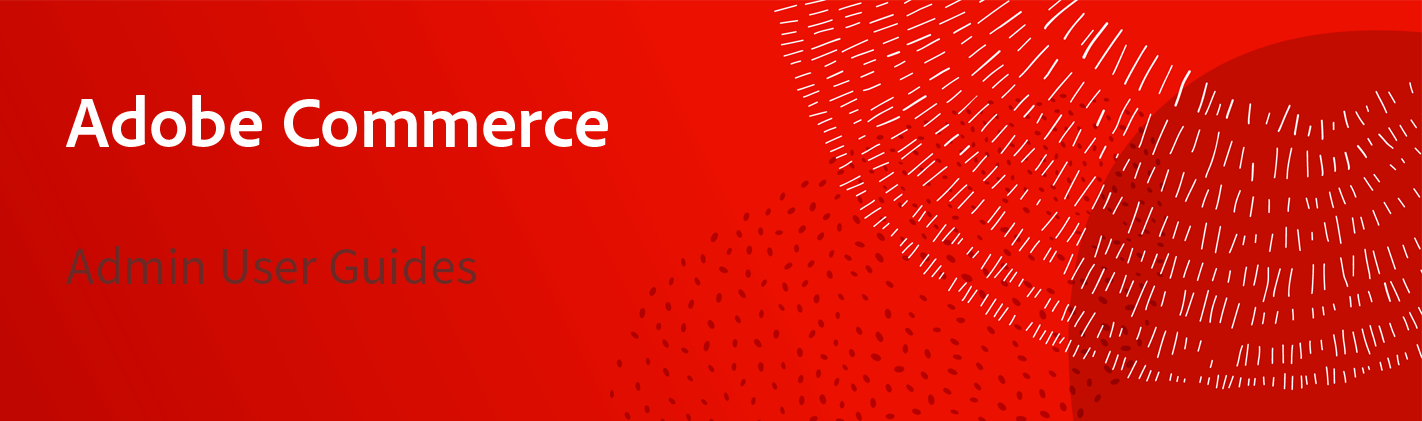
<style>
.page{position:relative;width:1422px;height:421px;background:#eb1000}
.page>*{position:absolute;margin:0}
.t1{font:72px "AdobeClean-Bold";color:#ffffff}
.t2{font:52px "SourceSansPro-Regular";color:#6c2925}
</style>
<div class="page">
<p class="t1" style="left:66px;top:95px;width:542px;height:52px">Adobe Commerce</p>
<p class="t2" style="left:66px;top:246px;width:411px;height:38px">Admin User Guides</p>
</div>
